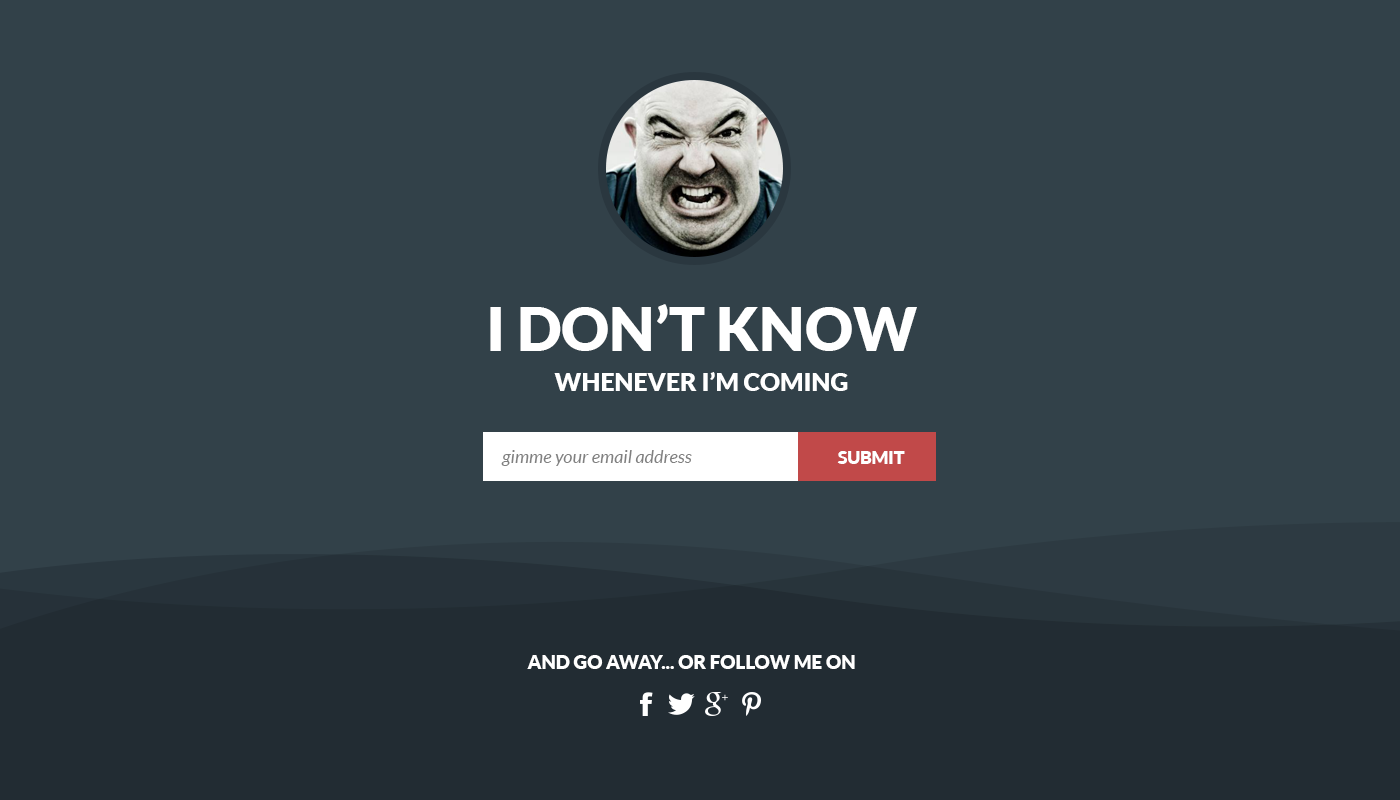
<style>
.page{position:relative;width:1400px;height:800px;background:#324149}
.page>*{position:absolute;margin:0}
.t1{font:25px "Lato-Black";color:#ffffff;text-transform:uppercase}
.t2{font:60px "Lato-Black";color:#ffffff;text-transform:uppercase}
.t3{font:18px "Lato-Italic";color:#808080}
.t4{font:17.5px "Lato-Black";color:#ffffff;text-transform:uppercase}
.t5{font:19px "Lato-Black";color:#ffffff;text-transform:uppercase}
</style>
<div class="page">
<p class="t1" style="left:490px;top:304px;width:427px;height:87px"><span class="t2">I don’t know </span>whenever I’m coming</p>
<p class="t3" style="left:501px;top:450px;width:191px;height:16px">gimme your email address</p>
<p class="t4" style="left:837px;top:451px;width:68px;height:13px">Submit</p>
<p class="t5" style="left:527px;top:655px;width:328px;height:14px">And go away... Or Follow me on</p>
</div>
